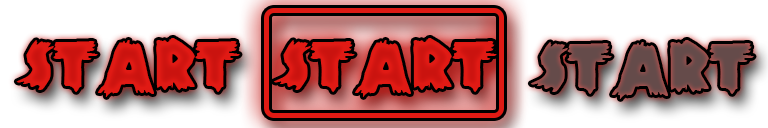
<style>
.page{position:relative;width:768px;height:128px;background:#ffffff}
.page>*{position:absolute;margin:0}
.t1{font:80px "ZombieA";color:#ca130f}
</style>
<div class="page">
<p class="t1" style="left:16px;top:38px;width:224px;height:59px">Start</p>
</div>
